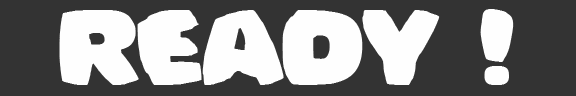
<style>
.page{position:relative;width:576px;height:96px;background:#333333}
.page>*{position:absolute;margin:0}
.t1{font:100px "Bomberman";color:#fefefe}
</style>
<div class="page">
<p class="t1" style="left:59px;top:9px;width:455px;height:76px">Ready !</p>
</div>
